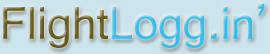
<style>
.page{position:relative;width:270px;height:54px;background:#cce4eb}
.page>*{position:absolute;margin:0}
.t1{font:48px "Shruti";color:#35bce8}
.t2{font:48px "Shruti";color:#665b1e}
</style>
<div class="page">
<p class="t1" style="left:3px;top:3px;width:262px;height:45px"><span class="t2">Flight</span>Logg.in’</p>
</div>
